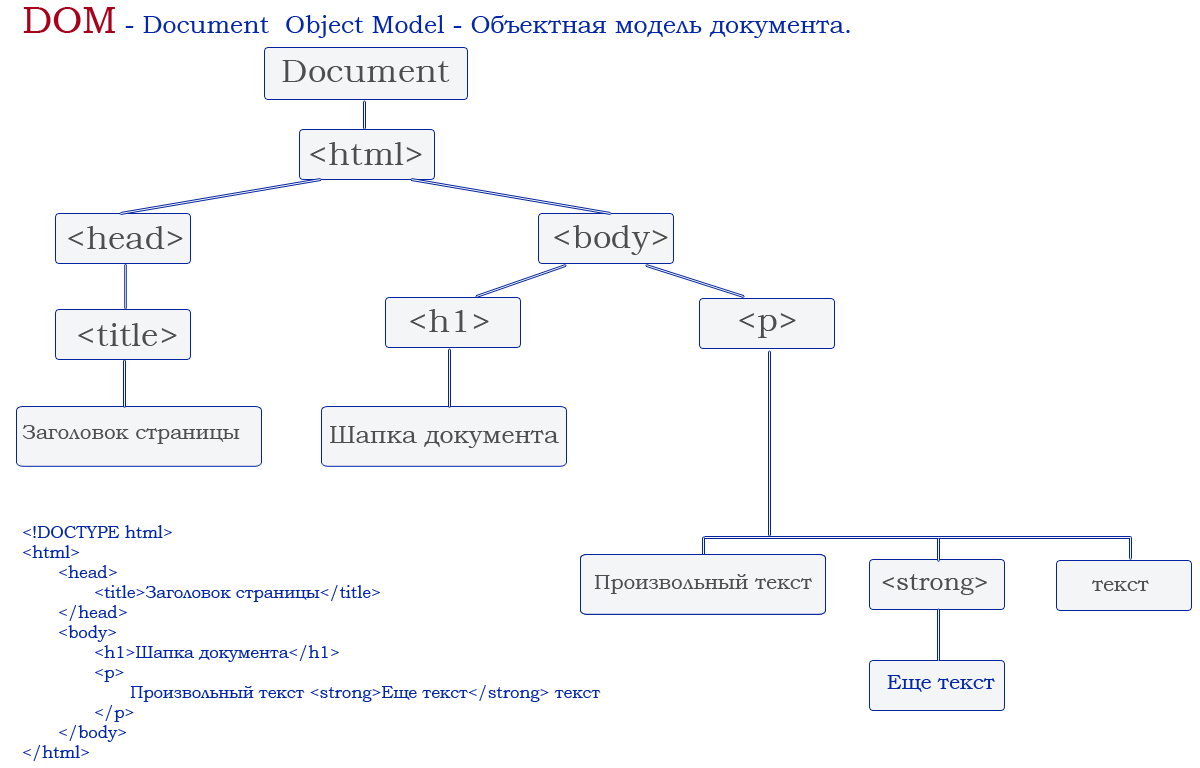
<style>
.page{position:relative;width:1200px;height:768px;background:#ffffff}
.page>*{position:absolute;margin:0}
.t1{font:25px "BookmanOldStyle";color:#0226ab}
.t2{font:37.5px "BookmanOldStyle";color:#a5031a}
.t3{font:33.3px "BookmanOldStyle";color:#4d4e4e}
.t4{font:20.8px "BookmanOldStyle";color:#4d4e4e}
.t5{font:25px "BookmanOldStyle";color:#4d4e4e}
.t6{font:16.7px "BookmanOldStyle";color:#0226ab}
.t7{font:20.8px "BookmanOldStyle";color:#0226ab}
</style>
<div class="page">
<p class="t1" style="left:23px;top:7px;width:827px;height:31px"><span class="t2">DOM</span> - Document  Object Model - Объектная модель документа.</p>
<p class="t3" style="left:282px;top:60px;width:168px;height:22px">Document</p>
<p class="t3" style="left:310px;top:142px;width:112px;height:23px">&lt;html&gt;</p>
<p class="t3" style="left:68px;top:226px;width:115px;height:23px">&lt;head&gt;</p>
<p class="t3" style="left:554px;top:225px;width:114px;height:30px">&lt;body&gt;</p>
<p class="t3" style="left:410px;top:309px;width:79px;height:23px">&lt;h1&gt;</p>
<p class="t3" style="left:739px;top:313px;width:57px;height:25px">&lt;p&gt;</p>
<p class="t3" style="left:78px;top:323px;width:99px;height:23px">&lt;title&gt;</p>
<p class="t4" style="left:22px;top:425px;width:218px;height:19px">Заголовок страницы</p>
<p class="t5" style="left:330px;top:426px;width:229px;height:22px">Шапка документа</p>
<p class="t6" style="left:23px;top:525px;width:578px;height:236px">&lt;!DOCTYPE html&gt;<br>&lt;html&gt;<br> &lt;head&gt;<br>  &lt;title&gt;Заголовок страницы&lt;/title&gt;<br> &lt;/head&gt;<br> &lt;body&gt;<br>  &lt;h1&gt;Шапка документа&lt;/h1&gt;<br>  &lt;p&gt;<br>   Произвольный текст &lt;strong&gt;Еще текст&lt;/strong&gt; текст<br>  &lt;/p&gt;<br> &lt;/body&gt;<br>&lt;/html&gt;</p>
<p class="t4" style="left:594px;top:574px;width:218px;height:20px">Произвольный текст</p>
<p class="t5" style="left:882px;top:574px;width:105px;height:21px">&lt;strong&gt;</p>
<p class="t4" style="left:1092px;top:580px;width:57px;height:11px">текст</p>
<p class="t7" style="left:887px;top:675px;width:108px;height:17px">Еще текст</p>
</div>
